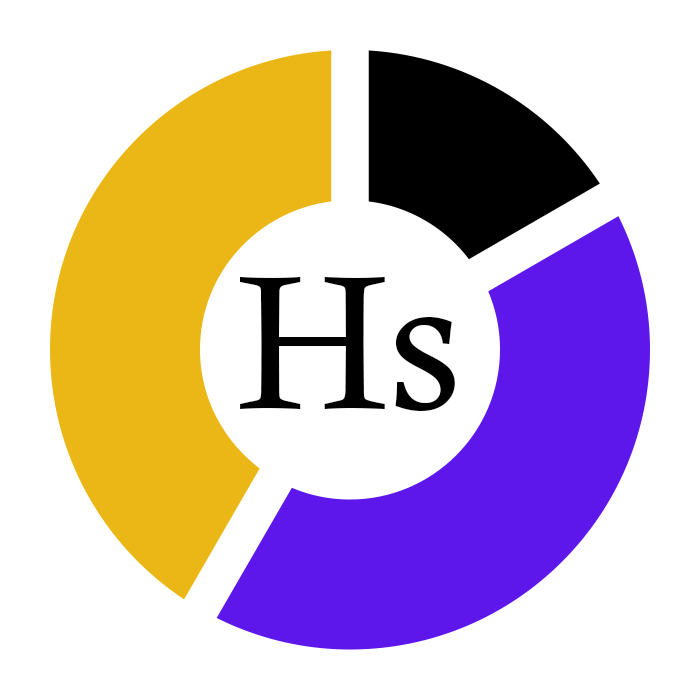
<style>
.page{position:relative;width:700px;height:700px;background:#ffffff}
.page>*{position:absolute;margin:0}
.t1{font:190.4px "CalistoMT";color:#000000}
</style>
<div class="page">
<p class="t1" style="left:240px;top:277px;width:215px;height:134px">Hs</p>
</div>
